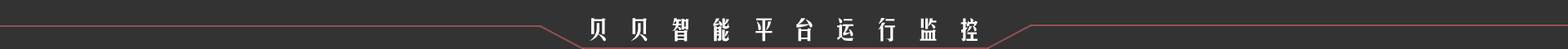
<style>
.page{position:relative;width:1568px;height:49px;background:#333333}
.page>*{position:absolute;margin:0}
.t1{font:24.5px "FZMHK--GBK1-0";letter-spacing:0.7em;color:#ffffff}
</style>
<div class="page">
<p class="t1" style="left:590px;top:18px;width:388px;height:24px">贝贝智能平台运行监控</p>
</div>
